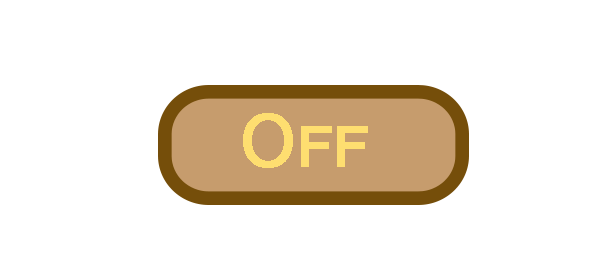
<style>
.page{position:relative;width:592px;height:276px;background:#ffffff}
.page>*{position:absolute;margin:0}
.t1{font:72px "ArialMT";letter-spacing:-0.025em;color:#fede70;font-variant:small-caps;font-weight:bold}
</style>
<div class="page">
<p class="t1" style="left:243px;top:113px;width:125px;height:55px">Off</p>
</div>
